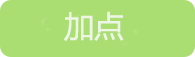
<style>
.page{position:relative;width:195px;height:57px;background:#aade72}
.page>*{position:absolute;margin:0}
.t1{font:30px "MicrosoftYaHei";color:#edf6e4}
</style>
<div class="page">
<p class="t1" style="left:64px;top:11px;width:60px;height:31px">加点</p>
</div>
